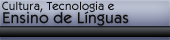
<style>
.page{position:relative;width:170px;height:40px}
.page>*{position:absolute;margin:0}
.t1{font:12px "KabobRegular";color:#0e0e0f}
.t2{font:16px "KabobRegular";color:#0e0e0f}
</style>
<div class="page">
<p class="t1" style="left:2px;top:1px;width:112px;height:12px">Cultura, Tecnologia e</p>
<p class="t2" style="left:3px;top:11px;width:126px;height:15px">Ensino de Línguas</p>
</div>
